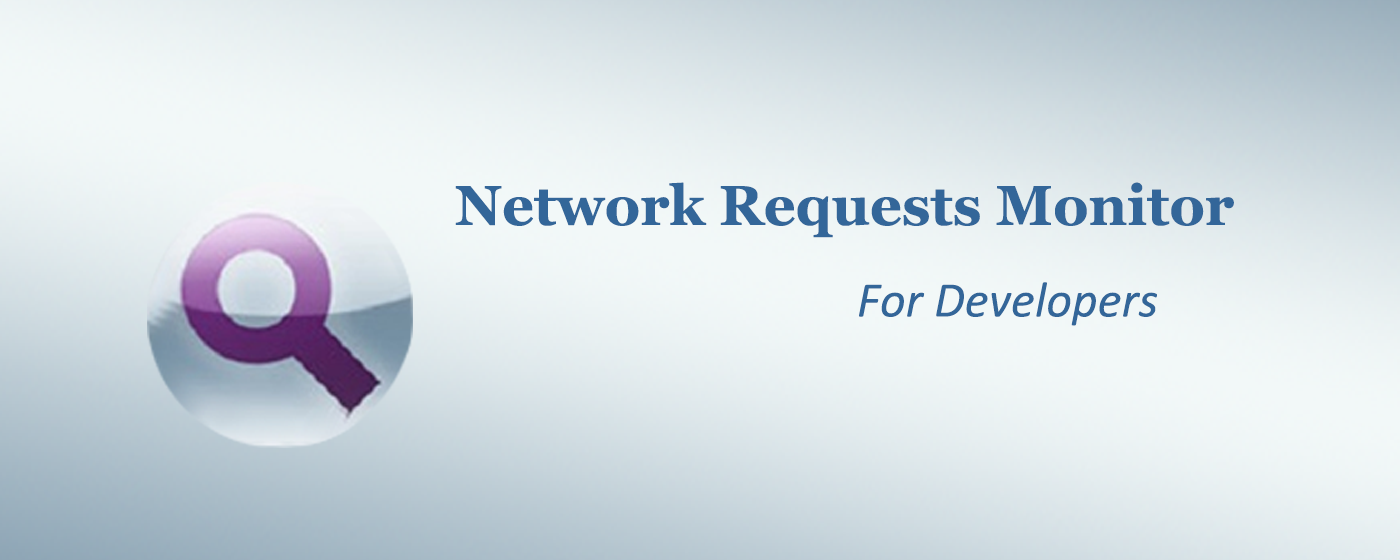
<style>
.page{position:relative;width:1400px;height:560px}
.page>*{position:absolute;margin:0}
.t1{font:56px "Georgia-Bold";color:#336699}
.t2{font:50px "Calibri-Italic";color:#336699}
</style>
<div class="page">
<p class="t1" style="left:455px;top:182px;width:779px;height:144px">Network Requests Monitor <br>                                                           <span class="t2">For Developers</span></p>
</div>
